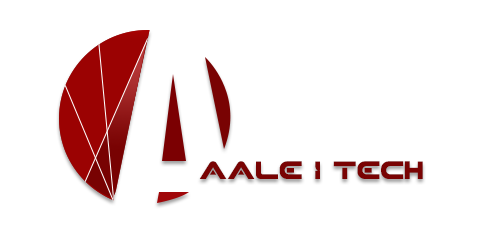
<style>
.page{position:relative;width:500px;height:242px;background:#ffffff}
.page>*{position:absolute;margin:0}
.t1{font:25px "XHARPRegular";color:#790303}
.t2{font:33.3px "YukonTechBold";color:#790303}
</style>
<div class="page">
<p class="t1" style="left:199px;top:161px;width:224px;height:18px">Aale <span class="t2">I</span> Tech</p>
</div>
